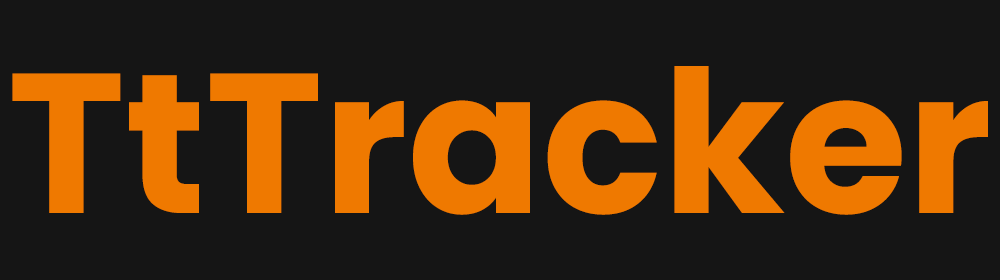
<style>
.page{position:relative;width:1000px;height:280px;background:#151515}
.page>*{position:absolute;margin:0}
.t1{font:198.3px "Poppins-Bold";color:#242424}
</style>
<div class="page">
<p class="t1" style="left:12px;top:66px;width:976px;height:149px">TtTracker</p>
</div>
